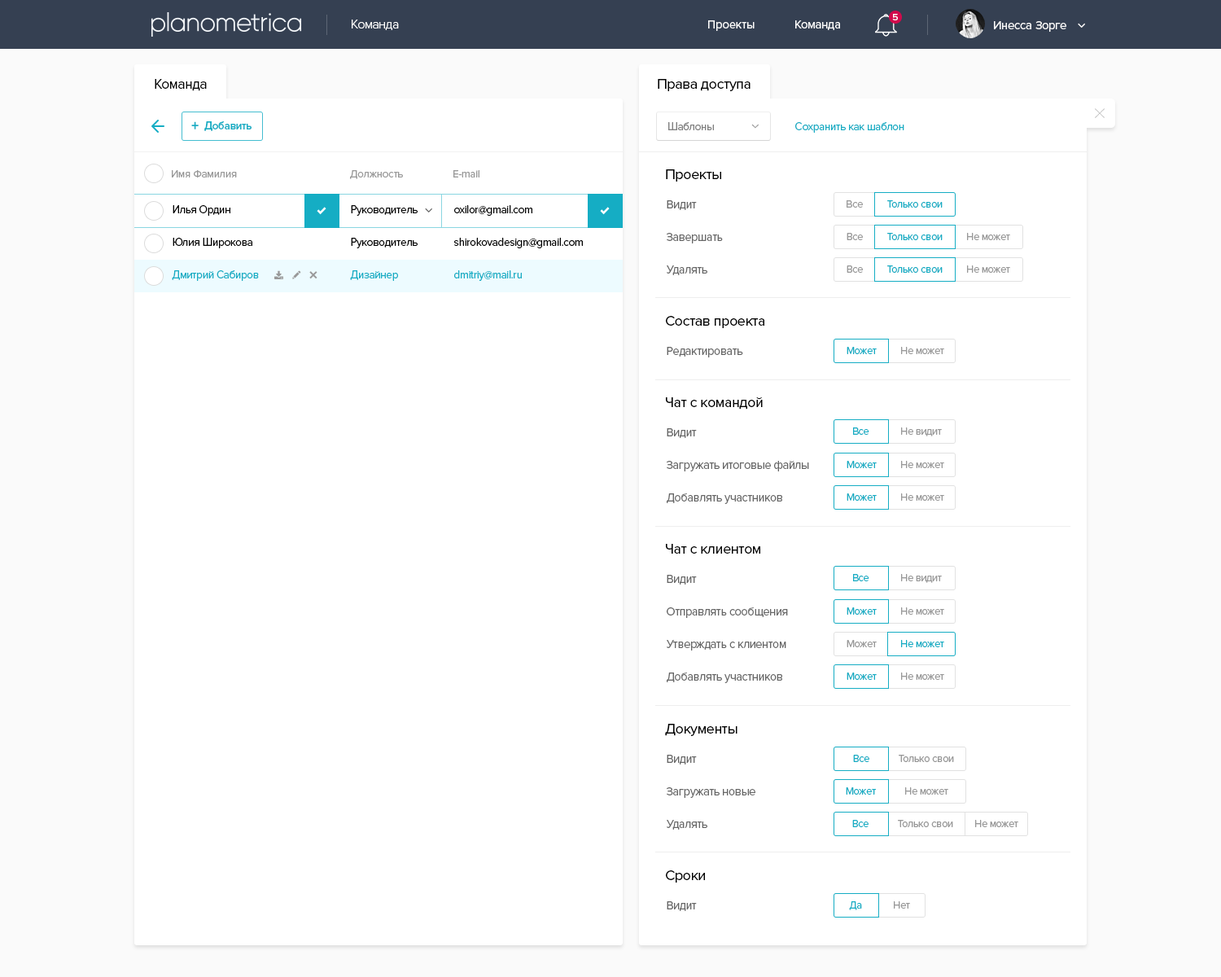
<style>
.page{position:relative;width:1221px;height:977px;background:#ffffff}
.page>*{position:absolute;margin:0}
.t1{font:9.8px "ProximaNova-Regular";letter-spacing:-0.05em;color:#ffffff;scale:0.96 1}
.t2{font:13px "ProximaNova-Light";letter-spacing:-0.025em;color:#ffffff}
.t3{font:12.2px "ProximaNova-Regular";letter-spacing:-0.01em;color:#ffffff}
.t4{font:14.7px "ProximaNova-Regular";letter-spacing:-0.025em;color:#000000;scale:0.96 1}
.t5{font:14.7px "ProximaNova-Regular";letter-spacing:-0.025em;color:#000000}
.t6{font:14.7px "ProximaNova-Bold";color:#15adc4}
.t7{font:11.4px "ProximaNova-Semibold";letter-spacing:-0.025em;color:#15adc4;scale:0.96 1}
.t8{font:11.4px "ProximaNova-Regular";letter-spacing:-0.025em;color:#7f7f7f;scale:0.96 1}
.t9{font:11.4px "ProximaNova-Regular";letter-spacing:-0.025em;color:#15adc4;scale:0.96 1}
.t10{font:10.6px "ProximaNova-Regular";letter-spacing:-0.01em;color:#999999}
.t11{font:11.4px/32.6px "ProximaNova-Regular";letter-spacing:-0.025em;color:#010101;scale:0.96 1}
.t12{font:11.4px/32.6px "ProximaNova-Regular";letter-spacing:-0.025em;color:#15adc4;scale:0.96 1}
.t13{font:12.2px/32.6px "ProximaNova-Regular";letter-spacing:-0.025em;color:#666666;scale:0.96 1}
.t14{font:10.6px "ProximaNova-Regular";letter-spacing:-0.025em;color:#15adc4}
.t15{font:10.6px "ProximaNova-Regular";letter-spacing:-0.025em;color:#9a9a9a}
.t16{font:10.6px "ProximaNova-Regular";letter-spacing:-0.025em;color:#999999}
.t17{font:12.2px "ProximaNova-Regular";letter-spacing:-0.025em;color:#666666;scale:0.96 1}
.t18{font:10.6px "ProximaNova-Regular";letter-spacing:-0.025em;color:#989898}
</style>
<div class="page">
<p class="t1" style="left:892px;top:14px;width:6px;height:6px">5</p>
<p class="t2" style="left:352px;top:20px;width:47px;height:10px">Команда</p>
<p class="t3" style="left:708px;top:20px;width:47px;height:11px">Проекты</p>
<p class="t3" style="left:795px;top:20px;width:45px;height:10px">Команда</p>
<p class="t3" style="left:994px;top:21px;width:72px;height:11px">Инесса Зорге</p>
<p class="t4" style="left:155px;top:79px;width:52px;height:12px">Команда</p>
<p class="t5" style="left:658px;top:79px;width:92px;height:12px">Права доступа</p>
<p class="t6" style="left:191px;top:121px;width:8px;height:8px">+</p>
<p class="t7" style="left:204px;top:121px;width:48px;height:10px">Добавить</p>
<p class="t8" style="left:668px;top:122px;width:46px;height:8px">Шаблоны</p>
<p class="t9" style="left:795px;top:122px;width:109px;height:11px">Сохранить как шаблон</p>
<p class="t10" style="left:172px;top:170px;width:65px;height:7px">Имя Фамилия</p>
<p class="t10" style="left:350px;top:170px;width:53px;height:9px">Должность</p>
<p class="t10" style="left:453px;top:170px;width:26px;height:7px">E-mail</p>
<p class="t5" style="left:666px;top:169px;width:55px;height:13px">Проекты</p>
<p class="t11" style="left:172px;top:205px;width:87px;height:76px">Илья Ордин<br>Юлия Широкова<br><span class="t12">Дмитрий Сабиров</span></p>
<p class="t11" style="left:350px;top:205px;width:68px;height:76px">Руководитель<br>Руководитель<br><span class="t12">Дизайнер</span></p>
<p class="t11" style="left:454px;top:205px;width:129px;height:76px">oxilor@gmail.com<br>shirokovadesign@gmail.com<br><span class="t12">dmitriy@mail.ru</span></p>
<p class="t13" style="left:667px;top:200px;width:56px;height:75px">Видит<br>Завершать<br>Удалять</p>
<p class="t14" style="left:846px;top:200px;width:97px;height:8px"><span class="t15">Все          </span>Только свои</p>
<p class="t14" style="left:846px;top:233px;width:164px;height:7px"><span class="t16">Все          </span>Только свои<span class="t16">          Не может</span></p>
<p class="t14" style="left:846px;top:265px;width:164px;height:8px"><span class="t16">Все          </span>Только свои<span class="t16">          Не может</span></p>
<p class="t5" style="left:666px;top:316px;width:98px;height:12px">Состав проекта</p>
<p class="t17" style="left:667px;top:347px;width:76px;height:10px">Редактировать</p>
<p class="t16" style="left:846px;top:347px;width:98px;height:7px"><span class="t14">Может </span>         Не может</p>
<p class="t5" style="left:666px;top:396px;width:97px;height:13px">Чат с командой</p>
<p class="t13" style="left:667px;top:428px;width:142px;height:76px">Видит<br>Загружать итоговые файлы<br>Добавлять участников</p>
<p class="t16" style="left:853px;top:427px;width:89px;height:9px"><span class="t14">Все </span>            Не видит</p>
<p class="t16" style="left:846px;top:461px;width:98px;height:7px"><span class="t14">Может </span>         Не может</p>
<p class="t16" style="left:846px;top:493px;width:98px;height:8px"><span class="t14">Может </span>         Не может</p>
<p class="t5" style="left:666px;top:544px;width:94px;height:9px">Чат с клиентом</p>
<p class="t13" style="left:667px;top:575px;width:121px;height:108px">Видит<br>Отправлять сообщения<br>Утверждать с клиентом<br>Добавлять участников</p>
<p class="t16" style="left:853px;top:574px;width:89px;height:9px"><span class="t14">Все </span>            Не видит</p>
<p class="t16" style="left:846px;top:607px;width:98px;height:8px"><span class="t14">Может </span>         Не может</p>
<p class="t14" style="left:846px;top:640px;width:98px;height:7px"><span class="t16">Может         </span> Не может</p>
<p class="t16" style="left:846px;top:672px;width:98px;height:8px"><span class="t14">Может </span>         Не может</p>
<p class="t5" style="left:665px;top:724px;width:72px;height:12px">Документы</p>
<p class="t13" style="left:667px;top:755px;width:88px;height:74px">Видит<br>Загружать новые<br>Удалять</p>
<p class="t18" style="left:853px;top:755px;width:101px;height:7px"><span class="t14">Все</span>            Только свои</p>
<p class="t16" style="left:846px;top:787px;width:102px;height:7px"><span class="t14">Может </span>           Не может</p>
<p class="t18" style="left:852px;top:820px;width:166px;height:7px"><span class="t14">Все</span>            Только свои         Не может</p>
<p class="t5" style="left:666px;top:870px;width:39px;height:12px">Сроки</p>
<p class="t17" style="left:667px;top:901px;width:30px;height:10px">Видит</p>
<p class="t18" style="left:849px;top:901px;width:61px;height:9px"><span class="t14">Да</span>             Нет</p>
</div>
